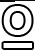
<style>
.page{position:relative;width:35px;height:50px;background:#ffffff}
.page>*{position:absolute;margin:0}
.t1{font:40px "Arial-BoldMT";color:#ffffff}
</style>
<div class="page">
<p class="t1" style="left:3px;top:5px;width:29px;height:29px">O</p>
</div>
